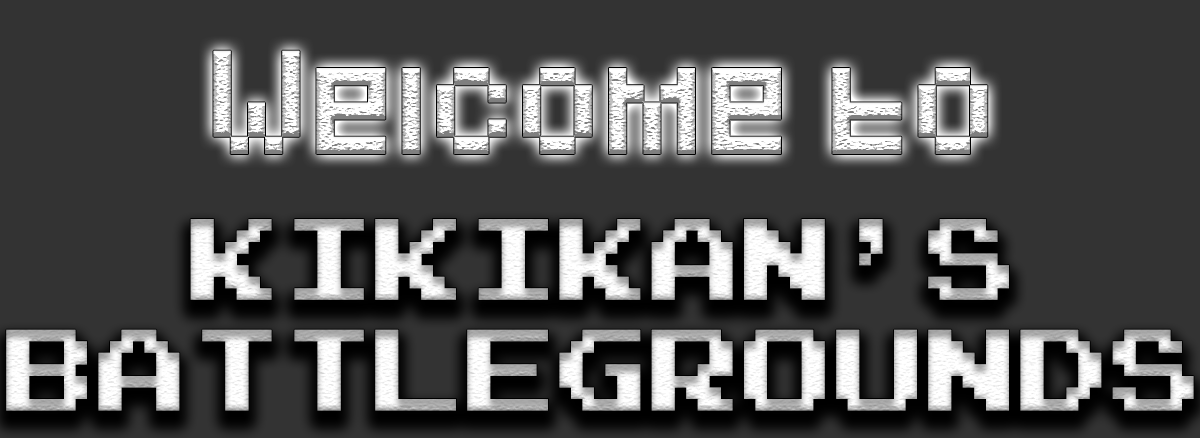
<style>
.page{position:relative;width:1200px;height:438px;background:#333333}
.page>*{position:absolute;margin:0}
.t1{font:86px "Pixeled"}
.t2{font:92.2px "PressStartK"}
</style>
<div class="page">
<p class="t1" style="left:213px;top:50px;width:775px;height:104px">Welcome to</p>
<p class="t2" style="left:6px;top:219px;width:1188px;height:192px;text-align:center">KIKIKAN’S<br>BATTLEGROUNDS</p>
</div>
